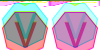
<style>
.page{position:relative;width:100px;height:50px}
.page>*{position:absolute;margin:0}
.t1{font:33.3px "MicrosoftYaHei";color:#409595}
.t2{font:33.3px "MicrosoftYaHei";color:#9c90bf}
</style>
<div class="page">
<p class="t1" style="left:14px;top:12px;width:23px;height:26px">V</p>
<p class="t2" style="left:64px;top:12px;width:23px;height:26px">V</p>
</div>
